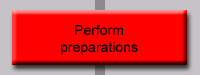
<style>
.page{position:relative;width:200px;height:75px;background:#ff0000}
.page>*{position:absolute;margin:0}
.t1{font:14px "ArialMT";color:#000000}
</style>
<div class="page">
<p class="t1" style="left:61px;top:25px;width:77px;height:30px;text-align:center">Perform<br>preparations</p>
</div>
